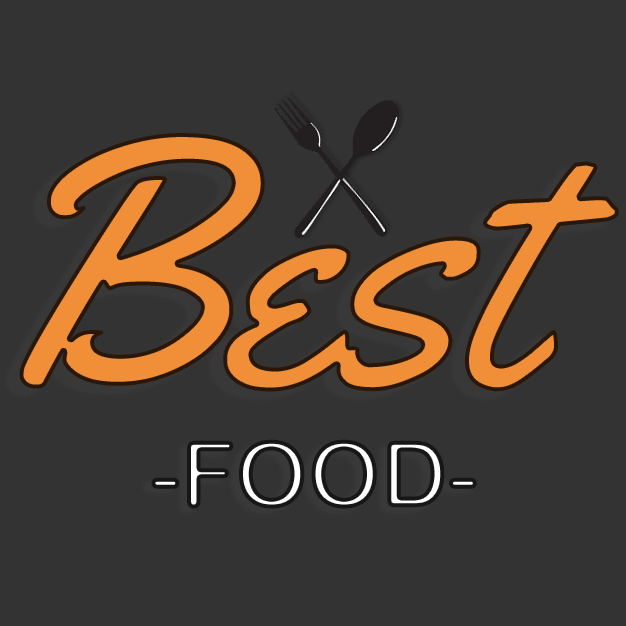
<style>
.page{position:relative;width:626px;height:626px;background:#333333}
.page>*{position:absolute;margin:0}
.t1{font:354.7px "Yellowtail-Regular";letter-spacing:-0.01em;color:#f89338}
.t2{font:92.7px "ArialRoundedMTBold";letter-spacing:-0.01em}
</style>
<div class="page">
<p class="t1" style="left:19px;top:133px;width:600px;height:259px;opacity:0.96">Best</p>
<p class="t2" style="left:151px;top:439px;width:326px;height:70px">-FOOD-</p>
</div>
